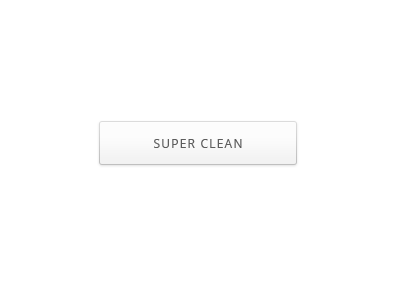
<style>
.page{position:relative;width:400px;height:300px;background:#ffffff}
.page>*{position:absolute;margin:0}
.t1{font:12px "OpenSans";letter-spacing:0.1em;color:#5d5d5d;text-transform:uppercase}
</style>
<div class="page">
<p class="t1" style="left:154px;top:139px;width:88px;height:9px">Super Clean</p>
</div>
